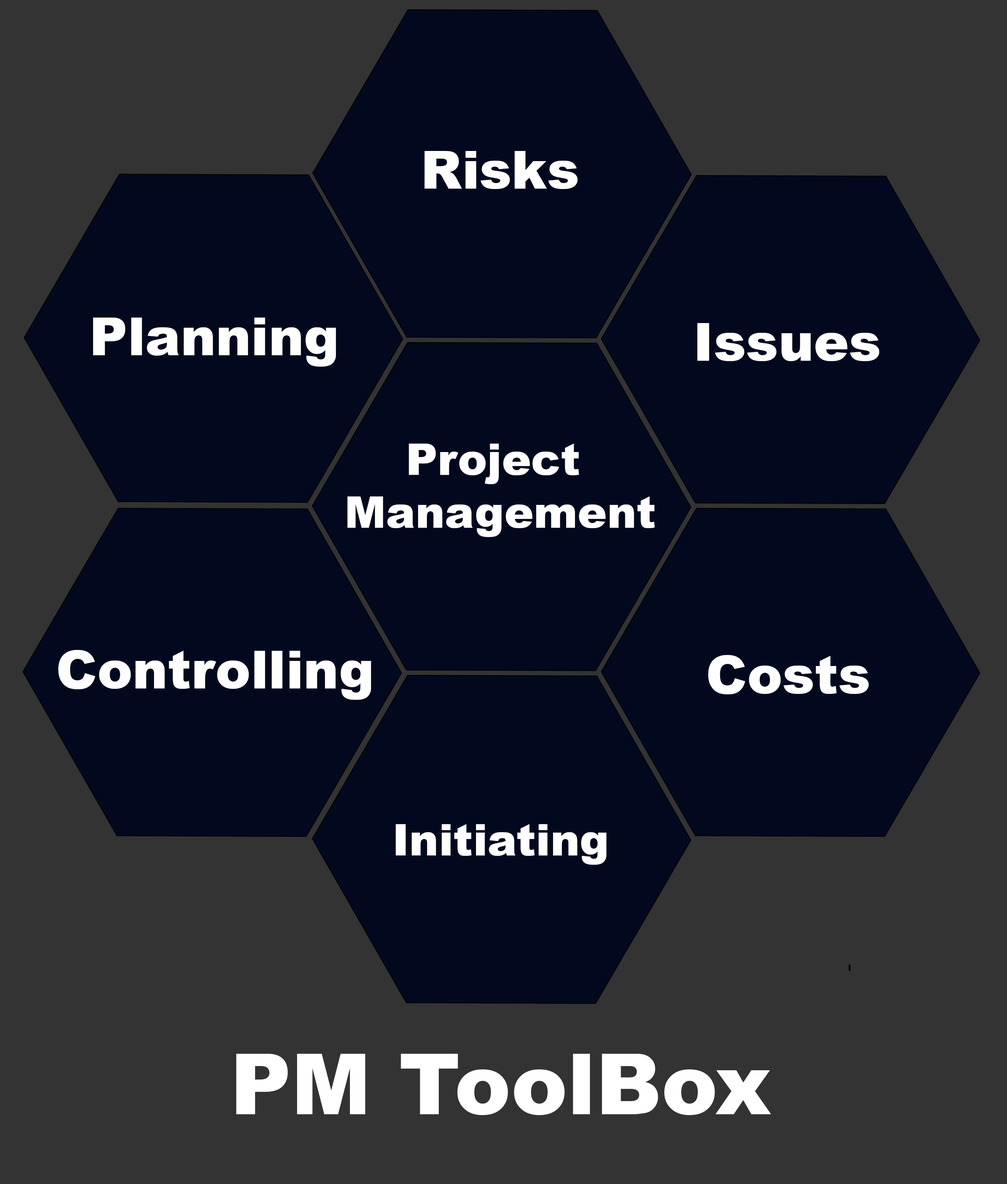
<style>
.page{position:relative;width:1007px;height:1184px;background:#02091e}
.page>*{position:absolute;margin:0}
.t1{font:52.9px "Arial-Black";color:#ffffff}
.t2{font:44.1px "Arial-Black";color:#ffffff}
.t3{font:84.6px "Arial-Black";color:#ffffff}
</style>
<div class="page">
<p class="t1" style="left:424px;top:151px;width:153px;height:38px">Risks</p>
<p class="t1" style="left:93px;top:318px;width:243px;height:49px">Planning</p>
<p class="t1" style="left:697px;top:323px;width:182px;height:38px">Issues</p>
<p class="t2" style="left:347px;top:444px;width:308px;height:93px;text-align:center">Project <br>Management</p>
<p class="t1" style="left:58px;top:650px;width:313px;height:50px">Controlling</p>
<p class="t1" style="left:708px;top:655px;width:160px;height:40px">Costs</p>
<p class="t2" style="left:396px;top:824px;width:211px;height:41px">Initiating</p>
<p class="t3" style="left:236px;top:1054px;width:535px;height:61px">PM ToolBox</p>
</div>
